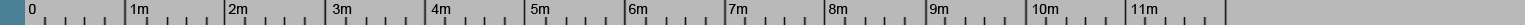
<style>
.page{position:relative;width:1525px;height:25px;background:#b9b9b9}
.page>*{position:absolute;margin:0}
.t1{font:14px "ArialMT";color:#000000}
</style>
<div class="page">
<p class="t1" style="left:29px;top:4px;width:7px;height:10px">0</p>
<p class="t1" style="left:130px;top:4px;width:19px;height:10px">1m</p>
<p class="t1" style="left:228px;top:4px;width:20px;height:10px">2m</p>
<p class="t1" style="left:333px;top:4px;width:19px;height:10px">3m</p>
<p class="t1" style="left:431px;top:4px;width:20px;height:10px">4m</p>
<p class="t1" style="left:531px;top:4px;width:19px;height:10px">5m</p>
<p class="t1" style="left:629px;top:4px;width:19px;height:10px">6m</p>
<p class="t1" style="left:729px;top:4px;width:19px;height:10px">7m</p>
<p class="t1" style="left:829px;top:4px;width:19px;height:10px">8m</p>
<p class="t1" style="left:930px;top:4px;width:19px;height:10px">9m</p>
<p class="t1" style="left:1032px;top:4px;width:27px;height:10px">10m</p>
<p class="t1" style="left:1131px;top:4px;width:27px;height:10px">11m</p>
</div>
